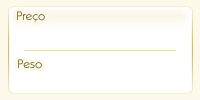
<style>
.page{position:relative;width:200px;height:100px;background:#ffffff}
.page>*{position:absolute;margin:0}
.t1{font:12px "SharnayExtralight";color:#685518}
.t2{font:12px "SharnayExtralight"}
</style>
<div class="page">
<p class="t1" style="left:17px;top:11px;width:28px;height:11px">Preço</p>
<p class="t2" style="left:18px;top:59px;width:24px;height:10px">Peso</p>
</div>
